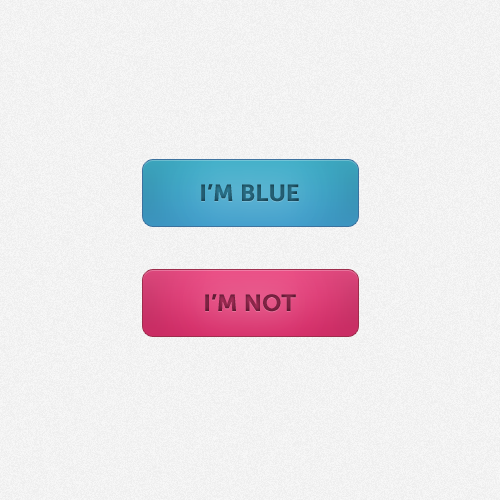
<style>
.page{position:relative;width:500px;height:500px}
.page>*{position:absolute;margin:0}
.t1{font:23px "MuseoSans-700";color:#235c70;text-transform:uppercase;font-weight:bold}
.t2{font:23px "MuseoSans-700";color:#7d2242;text-transform:uppercase;font-weight:bold}
</style>
<div class="page">
<p class="t1" style="left:201px;top:184px;width:98px;height:18px">I’m blue</p>
<p class="t2" style="left:205px;top:294px;width:91px;height:18px">I’m not</p>
</div>
